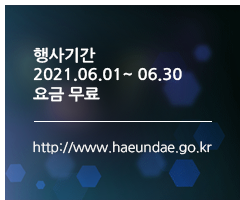
<style>
.page{position:relative;width:240px;height:200px}
.page>*{position:absolute;margin:0}
.t1{font:15.8px/19.4px "NanumGothicBold";letter-spacing:-0.01em;color:#ffffff;scale:1.05 1}
.t2{font:13.2px "NanumGothic";letter-spacing:-0.01em;color:#ffffff;scale:1.05 1}
</style>
<div class="page">
<p class="t1" style="left:33px;top:47px;width:149px;height:55px">행사기간<br>2021.06.01~ 06.30<br>요금 무료</p>
<p class="t2" style="left:33px;top:141px;width:179px;height:14px">http://www.haeundae.go.kr</p>
</div>
